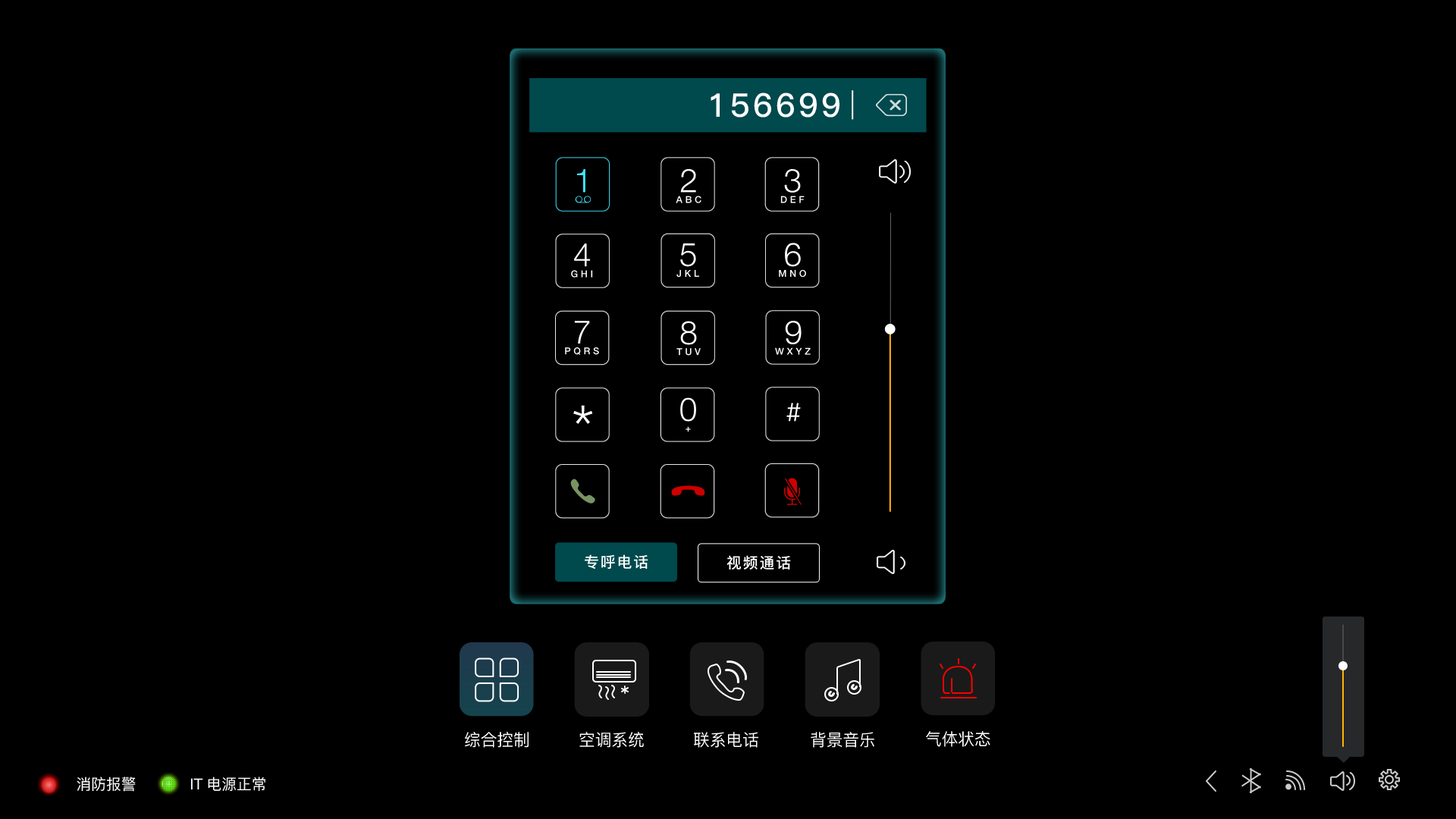
<style>
.page{position:relative;width:1456px;height:819px;background:#000000}
.page>*{position:absolute;margin:0}
.t1{font:32.8px "PingFang-SC-Bold";letter-spacing:0.1em;color:#ffffff}
.t2{font:41.9px "PingFang-SC-Medium";letter-spacing:0.1em;color:#ffffff}
.t3{font:25.2px "PingFang-SC-Medium";letter-spacing:0.1em;color:#ffffff}
.t4{font:15px "PingFang-SC-Bold";letter-spacing:0.1em;color:#ffffff}
.t5{font:16.7px "PingFang-SC-Medium";color:#ffffff}
.t6{font:15.2px "PingFang-SC-Medium";color:#ffffff}
</style>
<div class="page">
<p class="t1" style="left:711px;top:93px;width:128px;height:25px">156699</p>
<p class="t2" style="left:573px;top:405px;width:20px;height:19px">*</p>
<p class="t3" style="left:786px;top:403px;width:15px;height:19px">#</p>
<p class="t4" style="left:585px;top:554px;width:63px;height:16px">专呼电话</p>
<p class="t4" style="left:726px;top:555px;width:65px;height:15px">视频通话</p>
<p class="t5" style="left:465px;top:732px;width:64px;height:16px">综合控制</p>
<p class="t5" style="left:579px;top:732px;width:65px;height:16px">空调系统</p>
<p class="t5" style="left:694px;top:732px;width:64px;height:16px">联系电话</p>
<p class="t5" style="left:811px;top:732px;width:63px;height:16px">背景音乐</p>
<p class="t5" style="left:926px;top:731px;width:64px;height:16px">气体状态</p>
<p class="t6" style="left:77px;top:777px;width:59px;height:15px">消防报警</p>
<p class="t6" style="left:190px;top:777px;width:75px;height:15px">IT电源正常</p>
</div>
